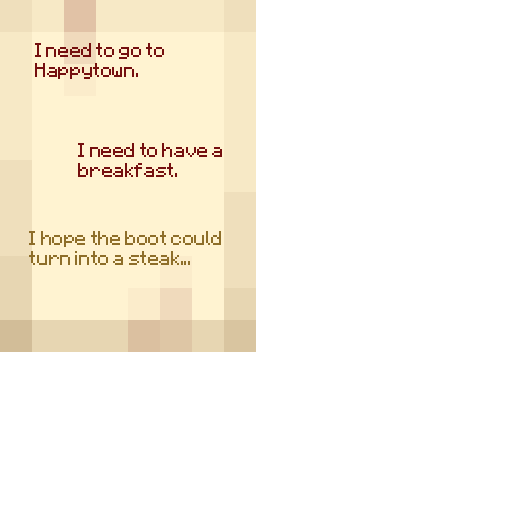
<style>
.page{position:relative;width:512px;height:512px;background:#ffffff}
.page>*{position:absolute;margin:0}
.t1{font:16px/20px "MinecraftAE-Pixel";letter-spacing:-0.025em;color:#750f0f}
.t2{font:16px/20px "MinecraftAE-Pixel";letter-spacing:-0.025em;color:#8e6e29}
</style>
<div class="page">
<p class="t1" style="left:35px;top:43px;width:187px;height:134px">I need to go to<br>Happytown.<br><br>     <br><br>            I need to have a<br>            breakfast.</p>
<p class="t2" style="left:29px;top:231px;width:192px;height:34px">I hope the boot could <br>turn into a steak...</p>
</div>
